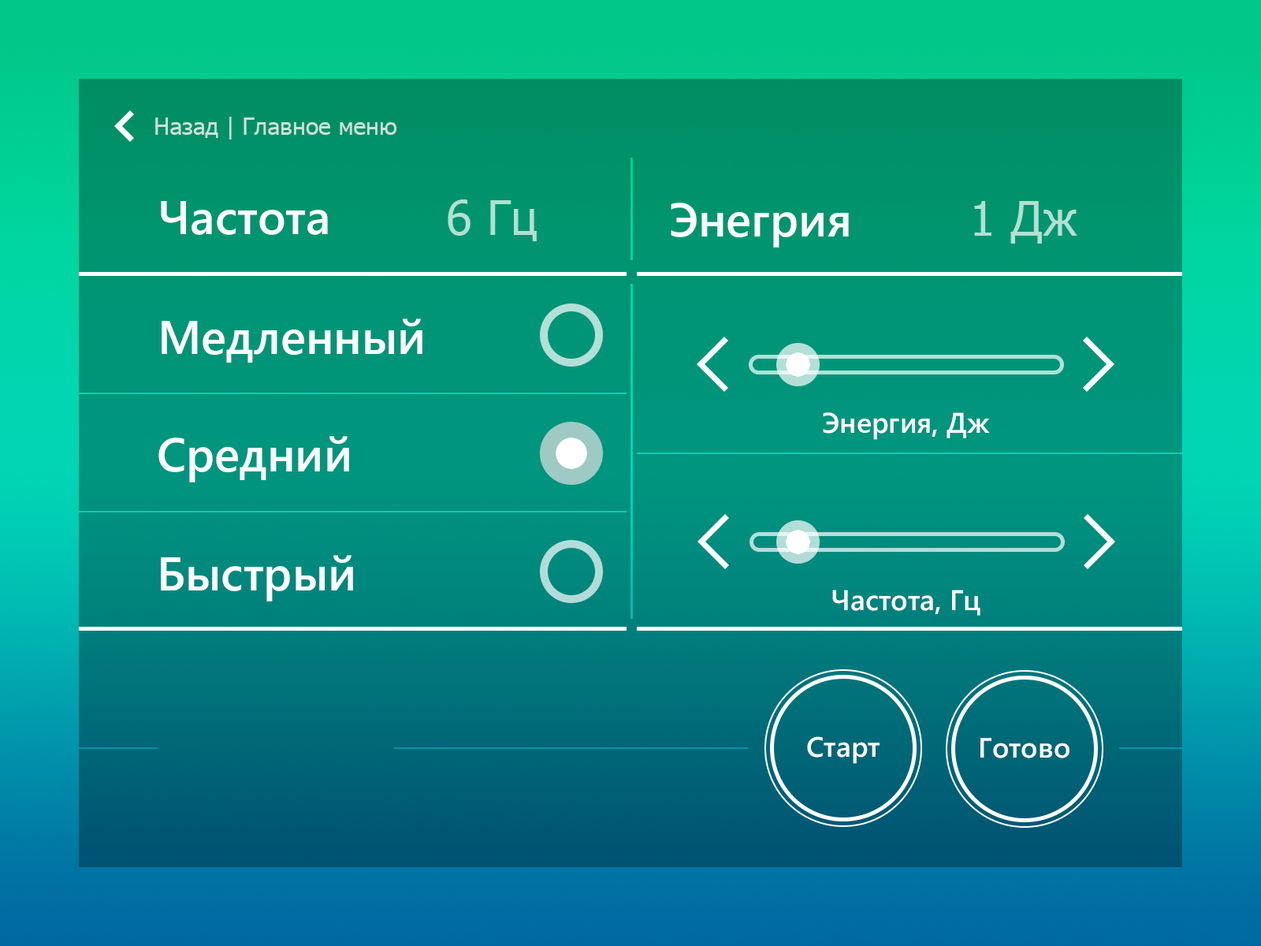
<style>
.page{position:relative;width:1261px;height:946px}
.page>*{position:absolute;margin:0}
.t1{font:23.4px "Tahoma";color:#cbe1d9}
.t2{font:47.3px "MicrosoftMHei-Bold";color:#ffffff}
.t3{font:47.3px "Tahoma";color:#b3dfd4}
.t4{font:28.4px "MicrosoftMHei-Bold";color:#ffffff}
.t5{font:28.1px "MicrosoftMHei-Bold";color:#ffffff}
</style>
<div class="page">
<p class="t1" style="left:155px;top:117px;width:241px;height:22px">Назад | Главное меню</p>
<p class="t2" style="left:161px;top:201px;width:167px;height:34px">Частота</p>
<p class="t3" style="left:448px;top:199px;width:89px;height:42px">6 Гц</p>
<p class="t2" style="left:671px;top:203px;width:178px;height:44px">Энегрия</p>
<p class="t3" style="left:974px;top:201px;width:103px;height:43px">1 Дж</p>
<p class="t2" style="left:162px;top:318px;width:260px;height:45px">Медленный</p>
<p class="t4" style="left:823px;top:412px;width:167px;height:28px">Энергия, Дж</p>
<p class="t2" style="left:158px;top:436px;width:191px;height:46px">Средний</p>
<p class="t2" style="left:161px;top:555px;width:192px;height:46px">Быстрый</p>
<p class="t4" style="left:832px;top:589px;width:148px;height:26px">Частота, Гц</p>
<p class="t5" style="left:807px;top:736px;width:72px;height:28px">Старт</p>
<p class="t5" style="left:980px;top:738px;width:89px;height:20px">Готово</p>
</div>
